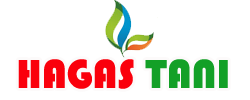
<style>
.page{position:relative;width:250px;height:100px;background:#ffffff}
.page>*{position:absolute;margin:0}
.t1{font:42px "Bauhaus93";color:#fa000c}
.t2{font:42px "Bauhaus93";color:#13a027}
</style>
<div class="page">
<p class="t1" style="left:18px;top:59px;width:210px;height:30px">HAGAS <span class="t2">TANI</span></p>
</div>
